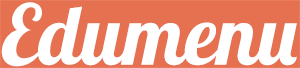
<style>
.page{position:relative;width:300px;height:68px;background:#e67151}
.page>*{position:absolute;margin:0}
.t1{font:82.9px "Lobster-Regular";color:#ffffff}
</style>
<div class="page">
<p class="t1" style="left:1px;top:2px;width:296px;height:65px">Edumenu</p>
</div>
